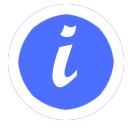
<style>
.page{position:relative;width:128px;height:128px;background:#ffffff}
.page>*{position:absolute;margin:0}
.t1{font:100px "ScriptMTBold";color:#ffffff}
</style>
<div class="page">
<p class="t1" style="left:52px;top:24px;width:25px;height:64px">i</p>
</div>
